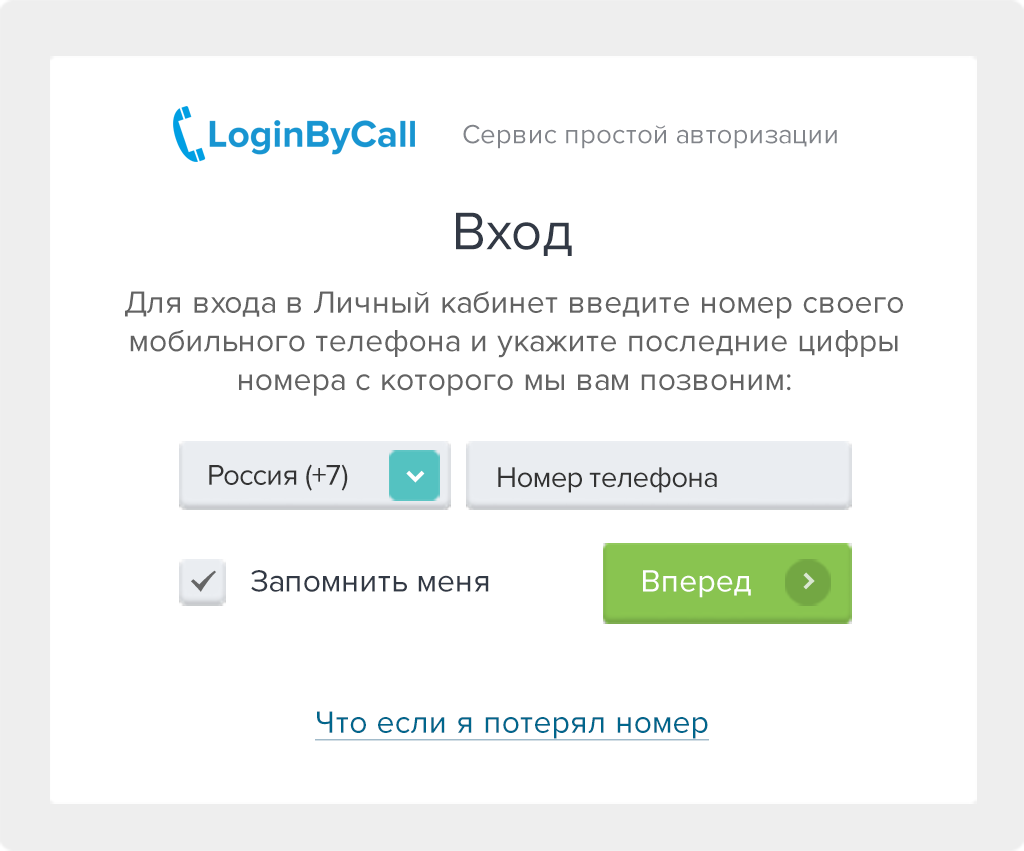
<style>
.page{position:relative;width:1024px;height:851px;background:#ffffff}
.page>*{position:absolute;margin:0}
.t1{font:27.3px "ProximaNova-Regular";color:#81848a}
.t2{font:54.6px "ProximaNova-Regular";color:#323945}
.t3{font:31.9px/38.2px "ProximaNova-Regular";color:#636363}
.t4{font:29.6px "ProximaNova-Regular";color:#333333}
.t5{font:38.7px "WebSymbolsLiga-Regular";color:#ffffff}
.t6{font:43.2px "WebSymbolsLiga-Regular";color:#666666}
.t7{font:31.9px "ProximaNova-Regular";color:#323945}
.t8{font:31.9px "ProximaNova-Regular";color:#ffffff}
.t9{font:36.4px "WebSymbolsLiga-Regular";color:#dae7d1}
.t10{font:31.9px "ProximaNova-Regular";color:#00668c;text-decoration:underline}
</style>
<div class="page">
<p class="t1" style="left:463px;top:124px;width:374px;height:25px">Сервис простой авторизации</p>
<p class="t2" style="left:456px;top:212px;width:116px;height:44px">Вход</p>
<p class="t3" style="left:125px;top:291px;width:778px;height:105px;text-align:center">Для входа в Личный кабинет введите номер своего мобильного телефона и укажите последние цифры номера с которого мы вам позвоним:</p>
<p class="t4" style="left:209px;top:464px;width:139px;height:27px">Россия (+7)</p>
<p class="t5" style="left:406px;top:470px;width:19px;height:13px">Ë</p>
<p class="t4" style="left:498px;top:467px;width:219px;height:26px">Номер телефона</p>
<p class="t6" style="left:191px;top:570px;width:25px;height:22px">õ</p>
<p class="t7" style="left:251px;top:570px;width:238px;height:22px">Запомнить меня</p>
<p class="t8" style="left:643px;top:570px;width:108px;height:28px">Вперед</p>
<p class="t9" style="left:803px;top:572px;width:12px;height:18px">×</p>
<p class="t10" style="left:315px;top:711px;width:394px;height:30px">Что если я потерял номер</p>
</div>
